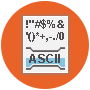
<style>
.page{position:relative;width:90px;height:90px;background:#e96228}
.page>*{position:absolute;margin:0}
.t1{font:11px "Arial-BoldMT";color:#4f4b4c}
.t2{font:12px "Arial-BoldMT";color:#4f4b4c}
</style>
<div class="page">
<p class="t1" style="left:26px;top:19px;width:38px;height:10px">!"#$%&amp;</p>
<p class="t1" style="left:26px;top:32px;width:38px;height:10px">'()*+,-./0</p>
<p class="t2" style="left:29px;top:54px;width:31px;height:9px">ASCII</p>
</div>
